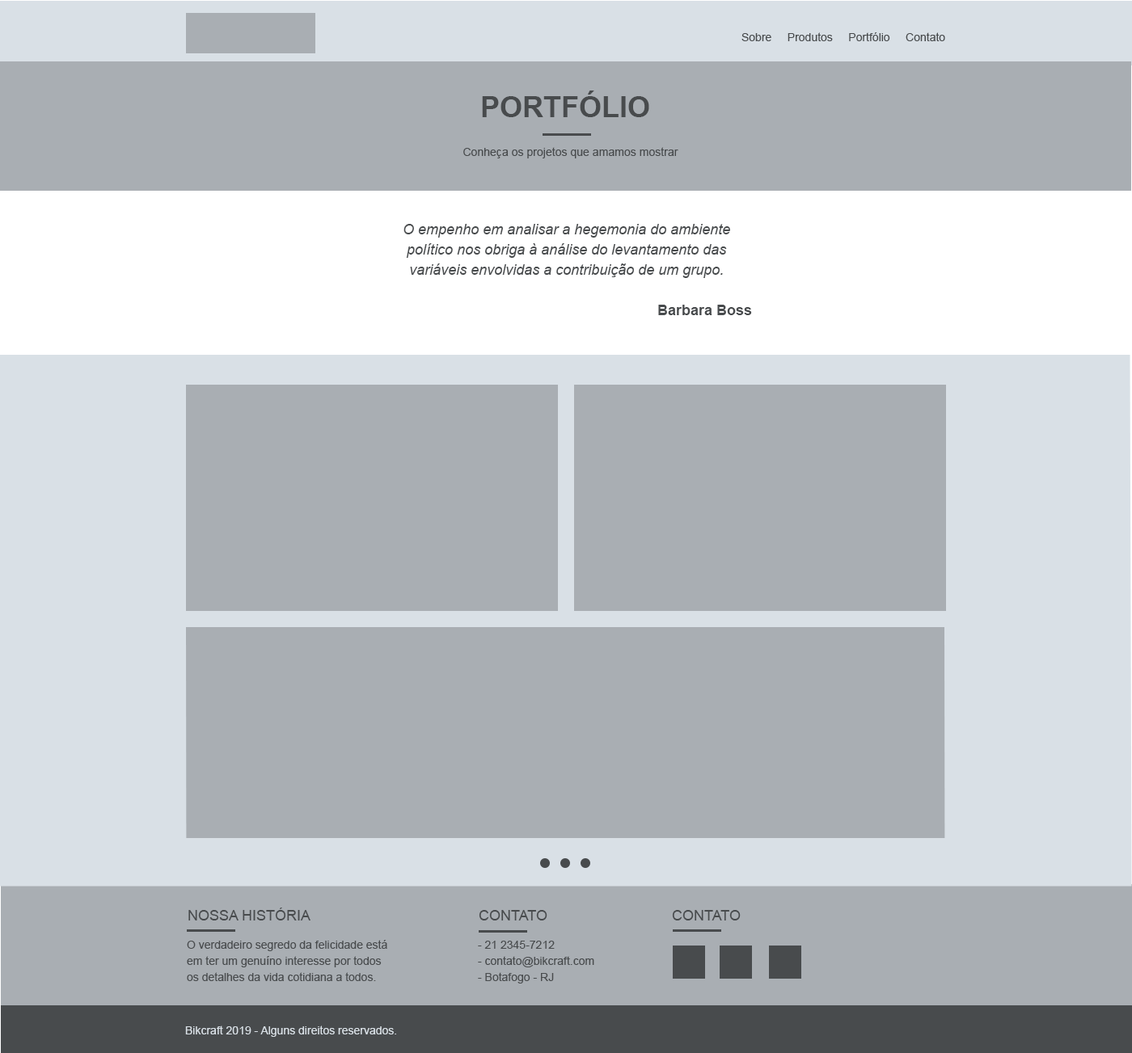
<style>
.page{position:relative;width:1132px;height:1053px;background:#a9aeb3}
.page>*{position:absolute;margin:0}
.t1{font:11.3px "ArialMT";color:#484b4d}
.t2{font:29.1px "Arial-BoldMT";color:#484b4d;text-transform:uppercase}
.t3{font:11.4px "ArialMT";color:#484b4d}
.t4{font:14.6px/20.2px "Arial-ItalicMT";color:#484b4d}
.t5{font:14.6px/20.2px "Arial-BoldMT";color:#484b4d}
.t6{font:14.6px "ArialMT";color:#484b4d;text-transform:uppercase}
.t7{font:11.3px/16.2px "ArialMT";color:#484b4d}
.t8{font:11.3px "ArialMT";color:#d9e0e6}
</style>
<div class="page">
<p class="t1" style="left:741px;top:32px;width:204px;height:9px">Sobre     Produtos     Portfólio     Contato</p>
<p class="t2" style="left:482px;top:91px;width:167px;height:26px">portfólio</p>
<p class="t3" style="left:463px;top:147px;width:215px;height:11px">Conheça os projetos que amamos mostrar</p>
<p class="t4" style="left:403px;top:224px;width:349px;height:91px;text-align:center">O empenho em analisar a hegemonia do ambiente       político nos obriga à análise do levantamento das variáveis envolvidas a contribuição de um grupo.<br><br><span class="t5">Barbara Boss</span></p>
<p class="t6" style="left:188px;top:908px;width:122px;height:13px">Nossa História</p>
<p class="t6" style="left:479px;top:910px;width:68px;height:11px">Contato</p>
<p class="t6" style="left:672px;top:910px;width:69px;height:11px">Contato</p>
<p class="t7" style="left:187px;top:940px;width:200px;height:42px">O verdadeiro segredo da felicidade está <br>em ter um genuíno interesse por todos<br>os detalhes da vida cotidiana a todos.</p>
<p class="t7" style="left:478px;top:941px;width:116px;height:43px">- 21 2345-7212<br>- contato@bikcraft.com<br>- Botafogo - RJ</p>
<p class="t8" style="left:185px;top:1026px;width:211px;height:11px">Bikcraft 2019 - Alguns direitos reservados.</p>
</div>
